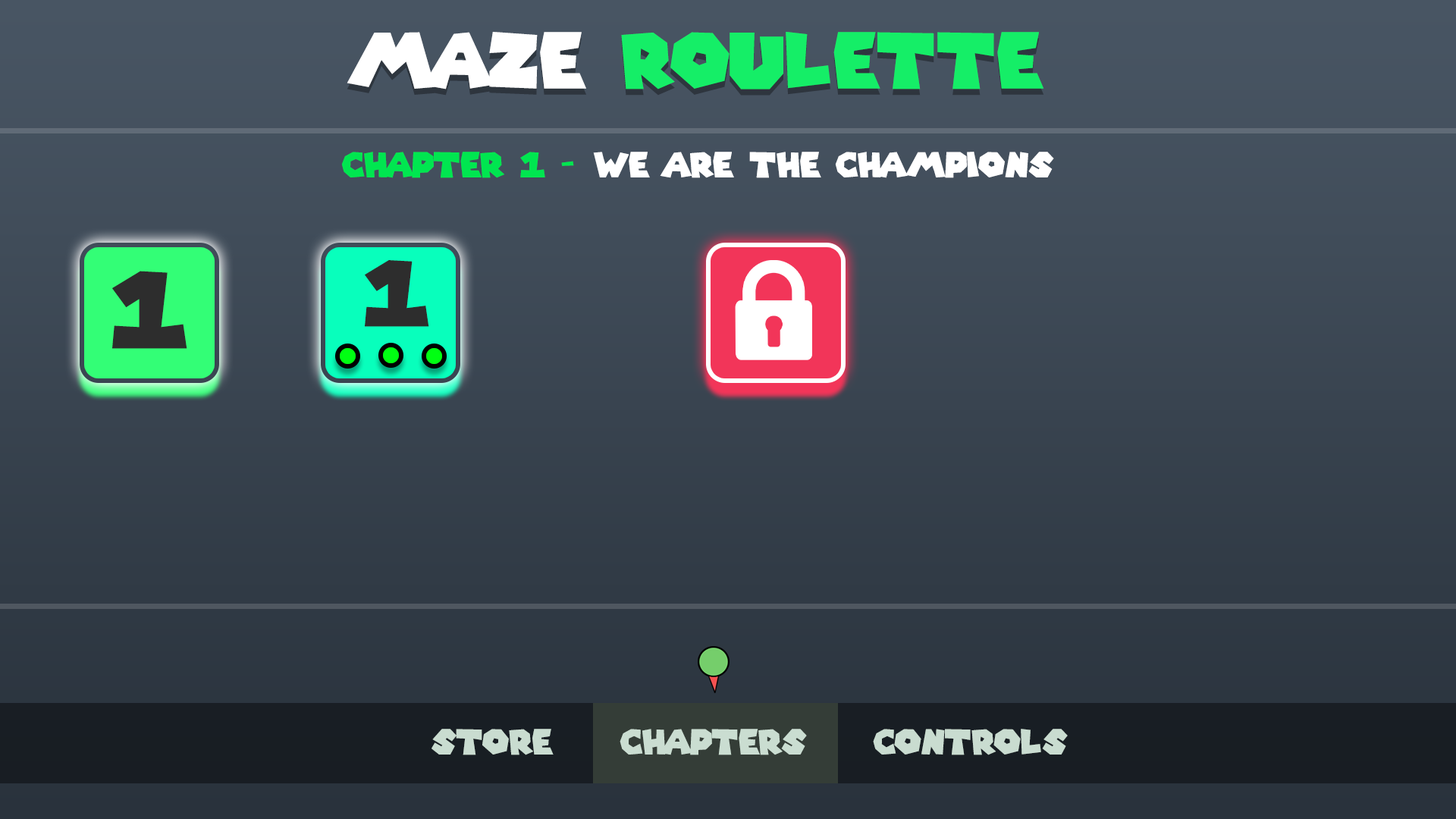
<style>
.page{position:relative;width:1456px;height:819px}
.page>*{position:absolute;margin:0}
.t1{font:75.9px "SuperMarioGalaxy";color:#15ee67}
.t2{font:75.9px "SuperMarioGalaxy";color:#ffffff}
.t3{font:34.1px "SuperMarioGalaxy";color:#ffffff}
.t4{font:34.1px "SuperMarioGalaxy";color:#00e650}
.t5{font:89.5px "SuperMarioGalaxy";color:#2d2d2d}
.t6{font:104.3px "SuperMarioGalaxy";color:#2d2d2d}
.t7{font:34.1px "SuperMarioGalaxy";color:#c9dcd0}
.t8{font:34.1px "SuperMarioGalaxy";color:#caddd1}
</style>
<div class="page">
<p class="t1" style="left:347px;top:32px;width:697px;height:57px"><span class="t2">MAZE </span>ROULETTE</p>
<p class="t3" style="left:341px;top:152px;width:713px;height:26px"><span class="t4">CHAPTER 1 - </span>WE ARE THE CHAMPIONS</p>
<p class="t5" style="left:365px;top:260px;width:64px;height:67px">1</p>
<p class="t6" style="left:112px;top:271px;width:75px;height:78px">1</p>
<p class="t7" style="left:431px;top:729px;width:123px;height:26px">STORE</p>
<p class="t8" style="left:620px;top:729px;width:187px;height:26px">CHAPTERS</p>
<p class="t7" style="left:873px;top:729px;width:195px;height:26px">CONTROLS</p>
</div>
